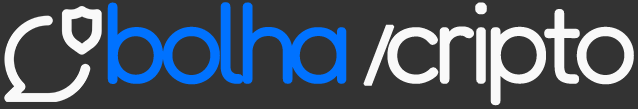
<style>
.page{position:relative;width:638px;height:109px;background:#333333}
.page>*{position:absolute;margin:0}
.t1{font:112px "Fredoka-Light";letter-spacing:-0.1em;color:#f9f9f9;font-weight:bold}
.t2{font:112px "Fredoka-Light";letter-spacing:-0.1em;color:#0072ff;font-weight:bold}
.t3{font:112px "MyriadArabic-Regular";letter-spacing:-0.1em;color:#f9f9f9;font-weight:bold}
</style>
<div class="page">
<p class="t1" style="left:107px;top:2px;width:527px;height:104px"><span class="t2">bolha </span><span class="t3">/</span>cripto</p>
</div>
